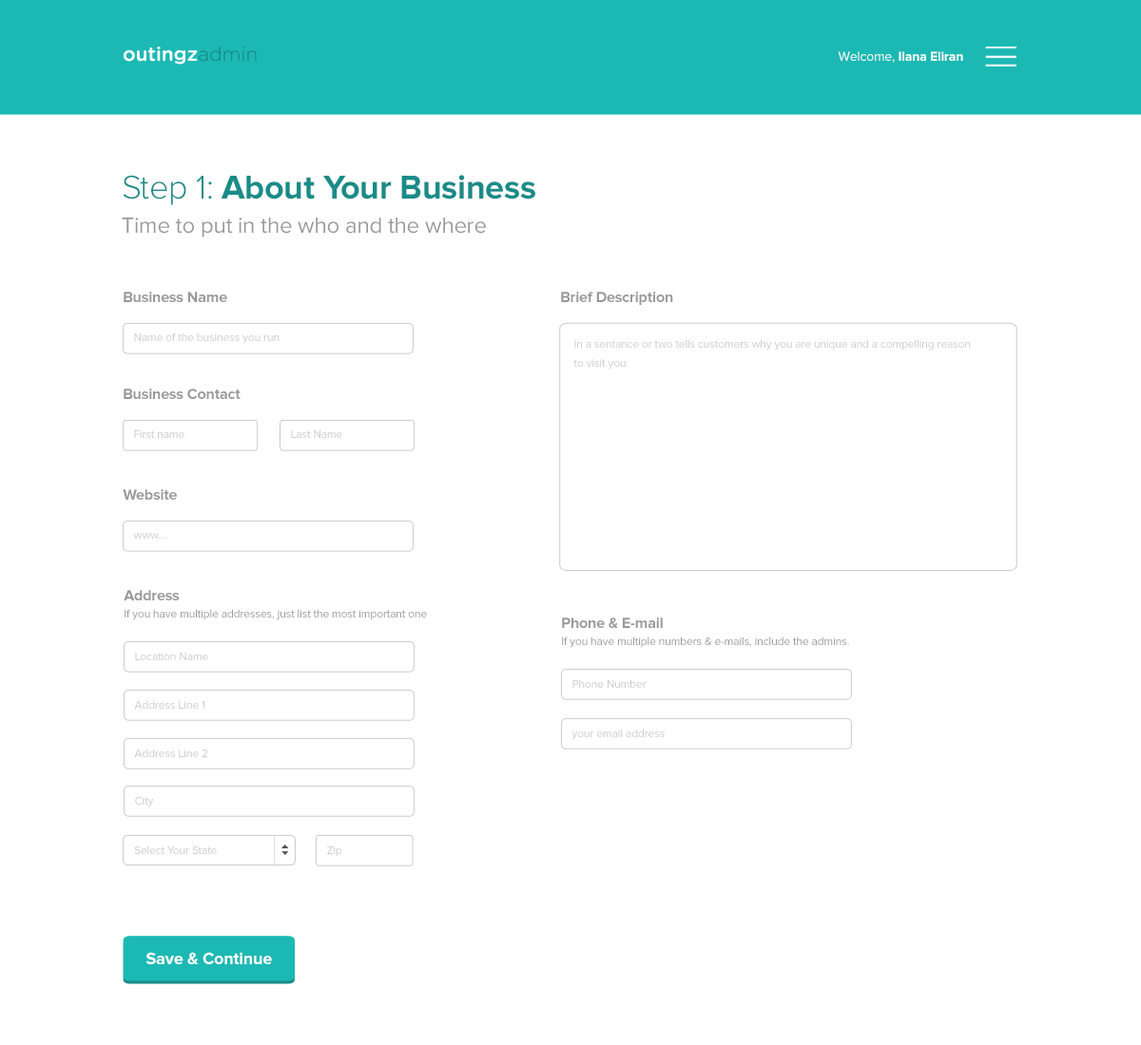
<style>
.page{position:relative;width:1141px;height:1045px;background:#ffffff}
.page>*{position:absolute;margin:0}
.t1{font:13.3px "ProximaNova-Bold";letter-spacing:-0.01em;color:#ffffff}
.t2{font:13.3px "ProximaNova-Regular";letter-spacing:-0.01em;color:#ffffff}
.t3{font:22.8px/34.2px "ProximaNova-Regular";letter-spacing:-0.01em;color:#999999}
.t4{font:34.2px "ProximaNova-Light";letter-spacing:-0.01em;color:#198c88}
.t5{font:34.2px "ProximaNova-Bold";letter-spacing:-0.01em;color:#198c88}
.t6{font:15.2px "ProximaNova-Bold";letter-spacing:-0.01em;color:#999999}
.t7{font:11.4px "ProximaNova-Regular";letter-spacing:-0.01em;color:#cccccc}
.t8{font:11.4px/15.2px "ProximaNova-Regular";letter-spacing:-0.01em;color:#cccccc}
.t9{font:11.4px/13.3px "ProximaNova-Regular";letter-spacing:-0.01em;color:#999999}
.t10{font:17.1px "ProximaNova-Bold";letter-spacing:-0.01em;color:#ffffff}
</style>
<div class="page">
<p class="t1" style="left:837px;top:51px;width:126px;height:12px"><span class="t2">Welcome, </span>Ilana Eliran</p>
<p class="t3" style="left:122px;top:175px;width:413px;height:63px"><span class="t4">Step 1:</span><span class="t5"> About Your Business<br></span>Time to put in the who and the where</p>
<p class="t6" style="left:124px;top:292px;width:103px;height:10px">Business Name</p>
<p class="t6" style="left:561px;top:292px;width:112px;height:13px">Brief Description</p>
<p class="t7" style="left:134px;top:333px;width:145px;height:11px">Name of the business you run</p>
<p class="t8" style="left:573px;top:339px;width:397px;height:31px">In a sentance or two tells customers why you are unique and a compelling reason <br>to visit you.</p>
<p class="t6" style="left:124px;top:389px;width:116px;height:10px">Business Contact</p>
<p class="t7" style="left:134px;top:430px;width:50px;height:8px">First name</p>
<p class="t7" style="left:291px;top:430px;width:51px;height:8px">Last Name</p>
<p class="t6" style="left:123px;top:489px;width:54px;height:11px">Website</p>
<p class="t7" style="left:133px;top:533px;width:34px;height:6px">www....</p>
<p class="t9" style="left:124px;top:590px;width:303px;height:31px"><span class="t6">Address<br></span>If you have multiple addresses, just list the most important one</p>
<p class="t9" style="left:562px;top:618px;width:287px;height:30px"><span class="t6">Phone &amp; E-mail<br></span>If you have multiple numbers &amp; e-mails, include the admins.</p>
<p class="t7" style="left:135px;top:652px;width:73px;height:9px">Location Name</p>
<p class="t7" style="left:572px;top:680px;width:74px;height:8px">Phone Number</p>
<p class="t7" style="left:134px;top:700px;width:71px;height:9px">Address Line 1</p>
<p class="t7" style="left:571px;top:729px;width:93px;height:11px">your email address</p>
<p class="t7" style="left:134px;top:749px;width:73px;height:9px">Address Line 2</p>
<p class="t7" style="left:135px;top:796px;width:19px;height:12px">City</p>
<p class="t7" style="left:134px;top:846px;width:83px;height:8px">Select Your State</p>
<p class="t7" style="left:327px;top:846px;width:15px;height:11px">Zip</p>
<p class="t10" style="left:146px;top:952px;width:126px;height:13px">Save &amp; Continue</p>
</div>
